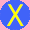
<style>
.page{position:relative;width:30px;height:30px;background:#4063f8}
.page>*{position:absolute;margin:0}
.t1{font:30px "DejaVuSansCondensed";color:#ffff00}
</style>
<div class="page">
<p class="t1" style="left:7px;top:4px;width:17px;height:22px">X</p>
</div>
